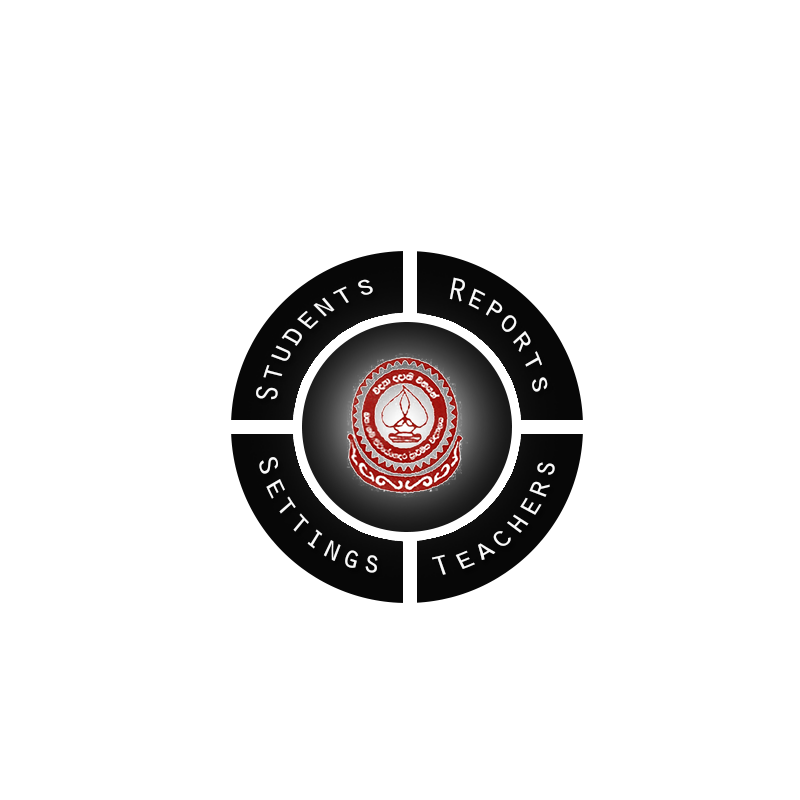
<style>
.page{position:relative;width:800px;height:800px;background:#ffffff}
.page>*{position:absolute;margin:0}
.t1{font:30.9px "OratorStd";color:#fafafa;scale:0.96 1}
</style>
<div class="page">
<p class="t1" style="left:256px;top:279px;width:117px;height:121px;rotate:-48deg">Students</p>
<p class="t1" style="left:449px;top:277px;width:99px;height:115px;rotate:48deg">Reports</p>
<p class="t1" style="left:259px;top:457px;width:119px;height:116px;rotate:43deg">Settings</p>
<p class="t1" style="left:431px;top:462px;width:124px;height:113px;rotate:-43deg">Teachers</p>
</div>
